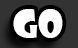
<style>
.page{position:relative;width:78px;height:48px;background:#333333}
.page>*{position:absolute;margin:0}
.t1{font:36px "ShowcardGothic-Reg";color:#ffffff}
</style>
<div class="page">
<p class="t1" style="left:13px;top:9px;width:50px;height:29px">go</p>
</div>
